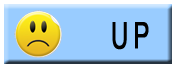
<style>
.page{position:relative;width:177px;height:68px;background:#99ccff}
.page>*{position:absolute;margin:0}
.t1{font:36px "Helvetica";letter-spacing:0.2em;color:#000000;font-weight:bold;scale:0.67 1}
</style>
<div class="page">
<p class="t1" style="left:112px;top:22px;width:37px;height:28px">UP</p>
</div>
